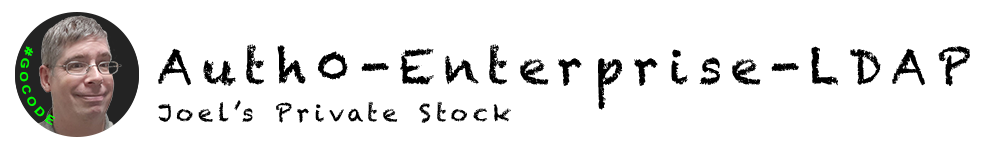
<style>
.page{position:relative;width:1000px;height:150px;background:#ffffff}
.page>*{position:absolute;margin:0}
.t1{font:11.2px "Arial-BoldMT";letter-spacing:0.2em;color:#00ff00}
.t2{font:48px "Chalkduster";letter-spacing:0.2em;color:#000000}
.t3{font:24px "Chalkduster";letter-spacing:0.2em;color:#000000}
</style>
<div class="page">
<p class="t1" style="left:19px;top:46px;width:37px;height:80px;rotate:72deg">#GOCODE</p>
<p class="t2" style="left:158px;top:44px;width:812px;height:66px">Auth0-Enterprise-LDAP</p>
<p class="t3" style="left:158px;top:100px;width:353px;height:23px">Joel’s Private Stock</p>
</div>
